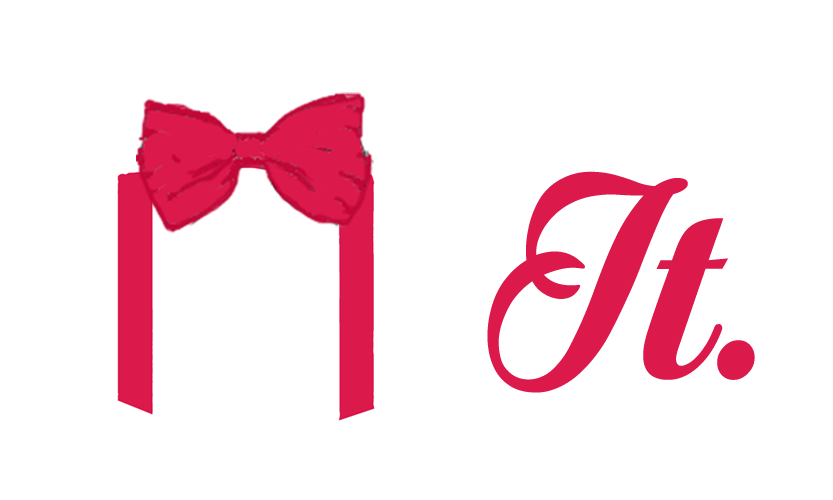
<style>
.page{position:relative;width:833px;height:500px;background:#ffffff}
.page>*{position:absolute;margin:0}
.t1{font:300px "QuinchoScriptPERSONALUSE";color:#db194b}
</style>
<div class="page">
<p class="t1" style="left:487px;top:171px;width:268px;height:222px">It.</p>
</div>
